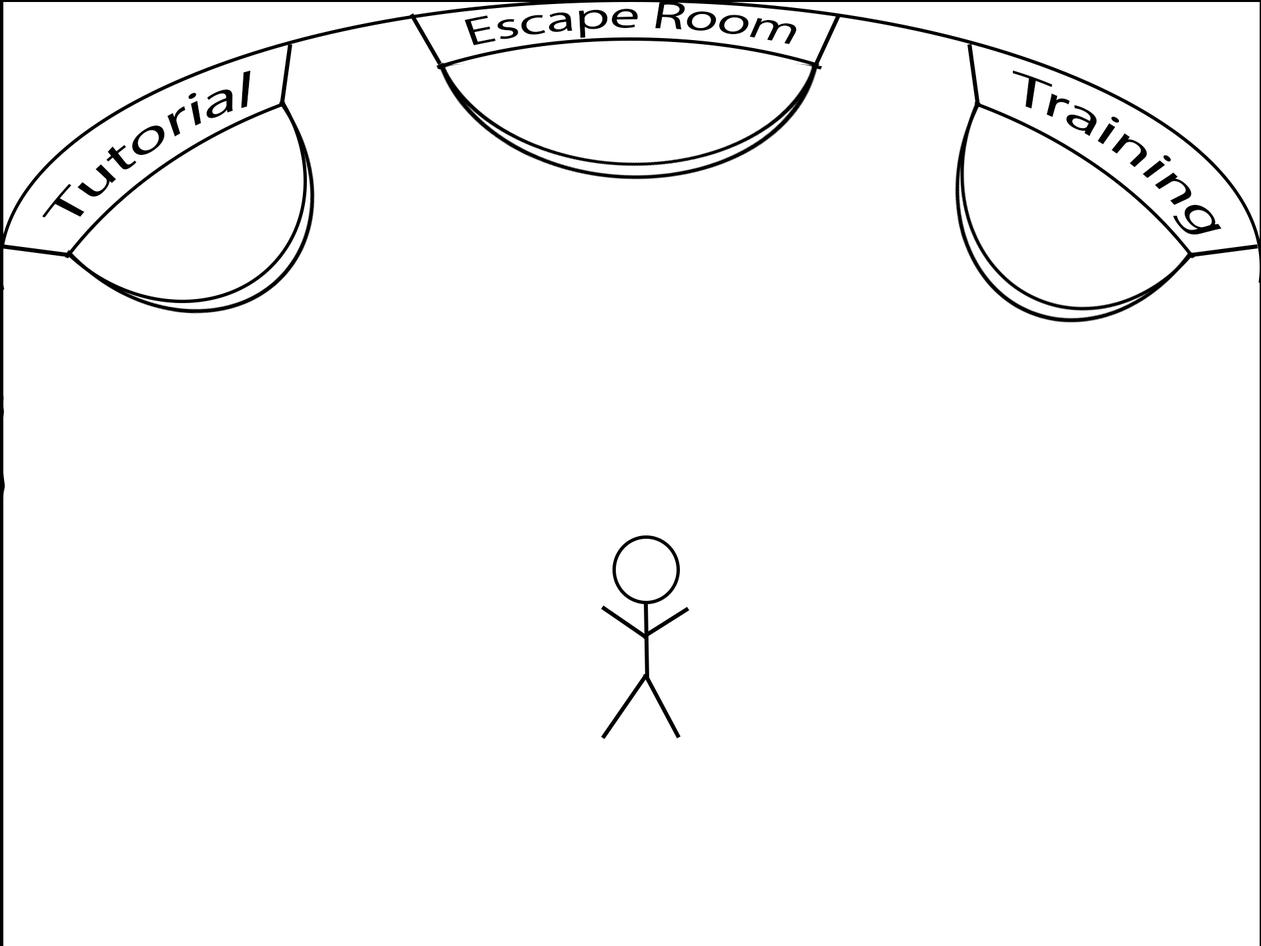
<style>
.page{position:relative;width:1261px;height:946px;background:#ffffff}
.page>*{position:absolute;margin:0}
.t1{font:38.9px "MyriadPro-Regular";color:#000000;scale:1.45 1}
.t2{font:44.5px "MyriadPro-Regular";color:#000000;scale:1.45 1}
</style>
<div class="page">
<p class="t1" style="left:464px;top:1px;width:333px;height:44px">Escape Room</p>
<p class="t2" style="left:42px;top:70px;width:209px;height:148px;rotate:-34deg">Tutorial</p>
<p class="t2" style="left:1013px;top:70px;width:209px;height:165px;rotate:36deg">Training</p>
</div>
